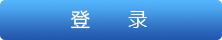
<style>
.page{position:relative;width:222px;height:40px}
.page>*{position:absolute;margin:0}
.t1{font:18.7px "MicrosoftYaHeiUI";color:#ffffff}
</style>
<div class="page">
<p class="t1" style="left:71px;top:10px;width:76px;height:19px">登       录</p>
</div>
